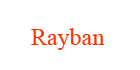
<style>
.page{position:relative;width:140px;height:70px;background:#ffffff}
.page>*{position:absolute;margin:0}
.t1{font:24px "TimesNewRomanPSMT";color:#ff3300}
</style>
<div class="page">
<p class="t1" style="left:31px;top:25px;width:73px;height:27px">Rayban</p>
</div>
